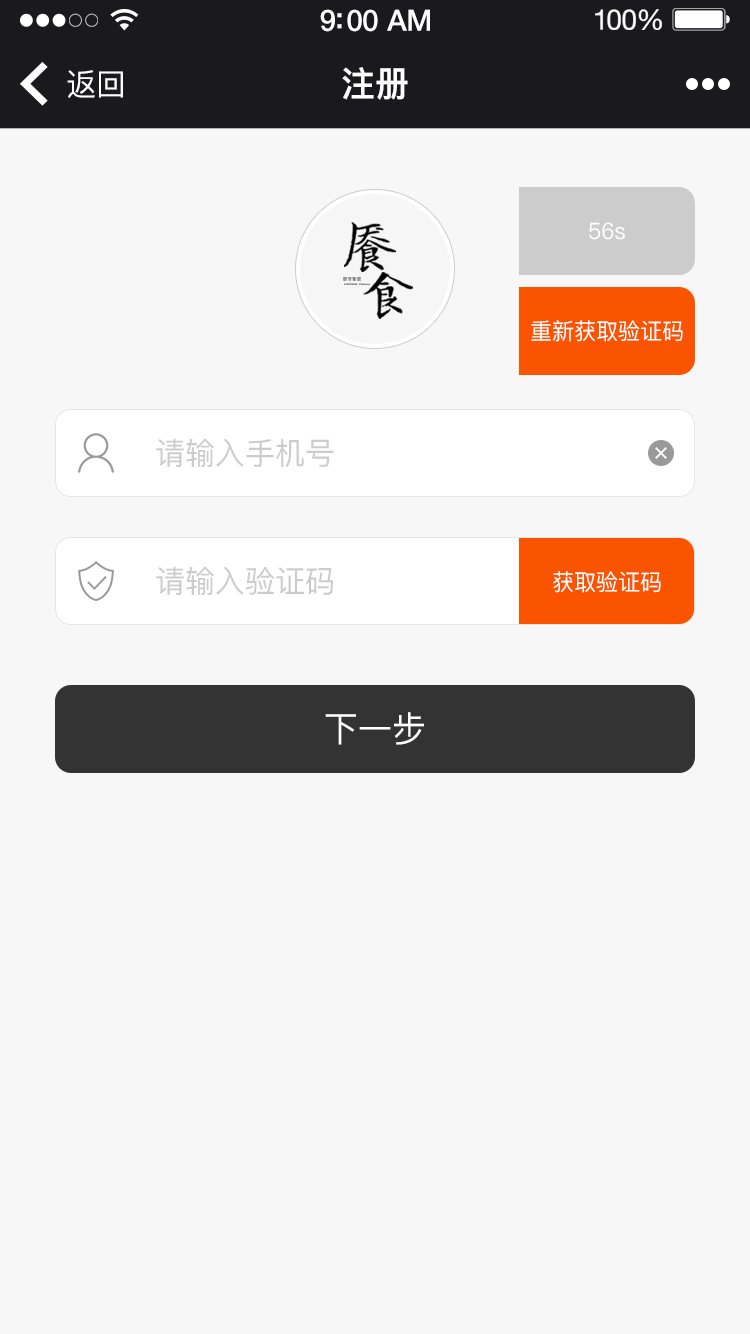
<style>
.page{position:relative;width:750px;height:1334px;background:#f7f7f7}
.page>*{position:absolute;margin:0}
.t1{font:29.5px "HelveticaNeue-Medium";letter-spacing:-0.02em;color:#ffffff}
.t2{font:28.3px "HelveticaNeue";letter-spacing:-0.02em;color:#ffffff}
.t3{font:30.9px "PingFang-SC-Medium";color:#ffffff;scale:0.97 1}
.t4{font:35px "PingFang-SC-Heavy";color:#ffffff;scale:0.97 1}
.t5{font:22.7px "PingFang-SC-Medium";color:#ffffff}
.t6{font:30.9px "PingFang-SC-Medium";color:#cccccc}
.t7{font:35px "PingFang-SC-Medium";color:#ffffff}
</style>
<div class="page">
<p class="t1" style="left:320px;top:9px;width:110px;height:23px">9:00 AM</p>
<p class="t2" style="left:595px;top:9px;width:67px;height:21px">100%</p>
<p class="t3" style="left:67px;top:70px;width:56px;height:28px">返回</p>
<p class="t4" style="left:342px;top:67px;width:66px;height:33px">注册</p>
<p class="t5" style="left:589px;top:222px;width:36px;height:18px">56s</p>
<p class="t5" style="left:531px;top:320px;width:152px;height:22px">重新获取验证码</p>
<p class="t6" style="left:156px;top:438px;width:178px;height:30px">请输入手机号</p>
<p class="t6" style="left:156px;top:566px;width:177px;height:29px">请输入验证码</p>
<p class="t5" style="left:553px;top:571px;width:108px;height:22px">获取验证码</p>
<p class="t7" style="left:325px;top:712px;width:99px;height:33px">下一步</p>
</div>
